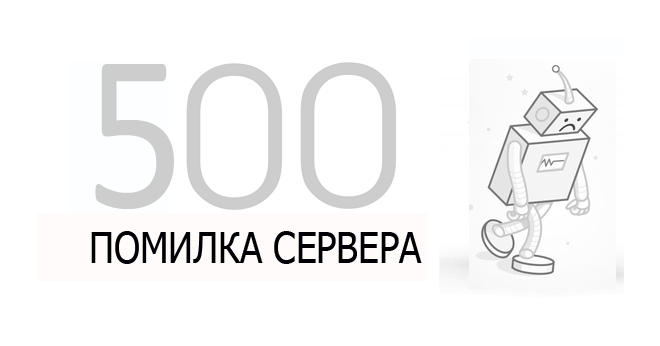
<style>
.page{position:relative;width:660px;height:346px;background:#ffffff}
.page>*{position:absolute;margin:0}
.t1{font:226.6px "Calibri";color:#cdcdcd;scale:0.86 1}
.t2{font:42.6px "Tahoma";color:#000004;scale:0.86 1}
</style>
<div class="page">
<p class="t1" style="left:95px;top:64px;width:79px;height:145px">5</p>
<p class="t2" style="left:91px;top:231px;width:331px;height:33px">ПОМИЛКА СЕРВЕРА</p>
</div>
